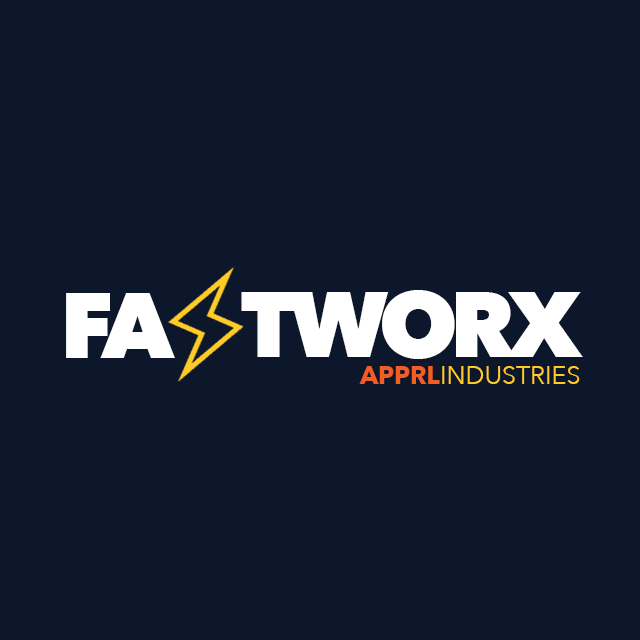
<style>
.page{position:relative;width:640px;height:640px;background:#0c172c}
.page>*{position:absolute;margin:0}
.t1{font:91.7px "AvenirNext-Heavy";letter-spacing:-0.075em;color:#ffffff}
.t2{font:91.7px "AvenirNext-Heavy";letter-spacing:-0.08em;color:#ffffff}
.t3{font:25px "AvenirNext-Regular";color:#ffc926}
.t4{font:25px "AvenirNext-Bold";color:#f25c25}
</style>
<div class="page">
<p class="t1" style="left:66px;top:293px;width:109px;height:65px">FA</p>
<p class="t2" style="left:241px;top:290px;width:342px;height:69px">TWORX</p>
<p class="t3" style="left:359px;top:366px;width:221px;height:18px"><span class="t4">APPRL</span>INDUSTRIES</p>
</div>
